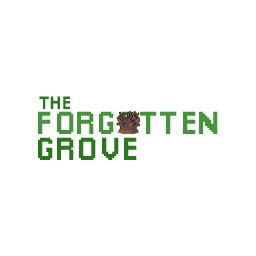
<style>
.page{position:relative;width:256px;height:256px;background:#ffffff}
.page>*{position:absolute;margin:0}
.t1{font:18px "Pixellari";color:#27791c}
.t2{font:32.5px "Pixellari";color:#45943b}
.t3{font:32.5px "Pixellari";color:#27791c}
</style>
<div class="page">
<p class="t1" style="left:39px;top:96px;width:31px;height:13px">THE</p>
<p class="t2" style="left:38px;top:111px;width:180px;height:23px">FORGOTTEN</p>
<p class="t3" style="left:38px;top:137px;width:99px;height:23px">GROVE</p>
</div>
